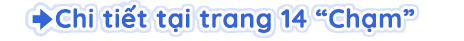
<style>
.page{position:relative;width:464px;height:41px;background:#ffffff}
.page>*{position:absolute;margin:0}
.t1{font:26px "Quicksand-Bold";color:#3264dc;font-weight:bold}
</style>
<div class="page">
<p class="t1" style="left:55px;top:4px;width:360px;height:29px">Chi tiết tại trang 14 “Chạm”</p>
</div>
